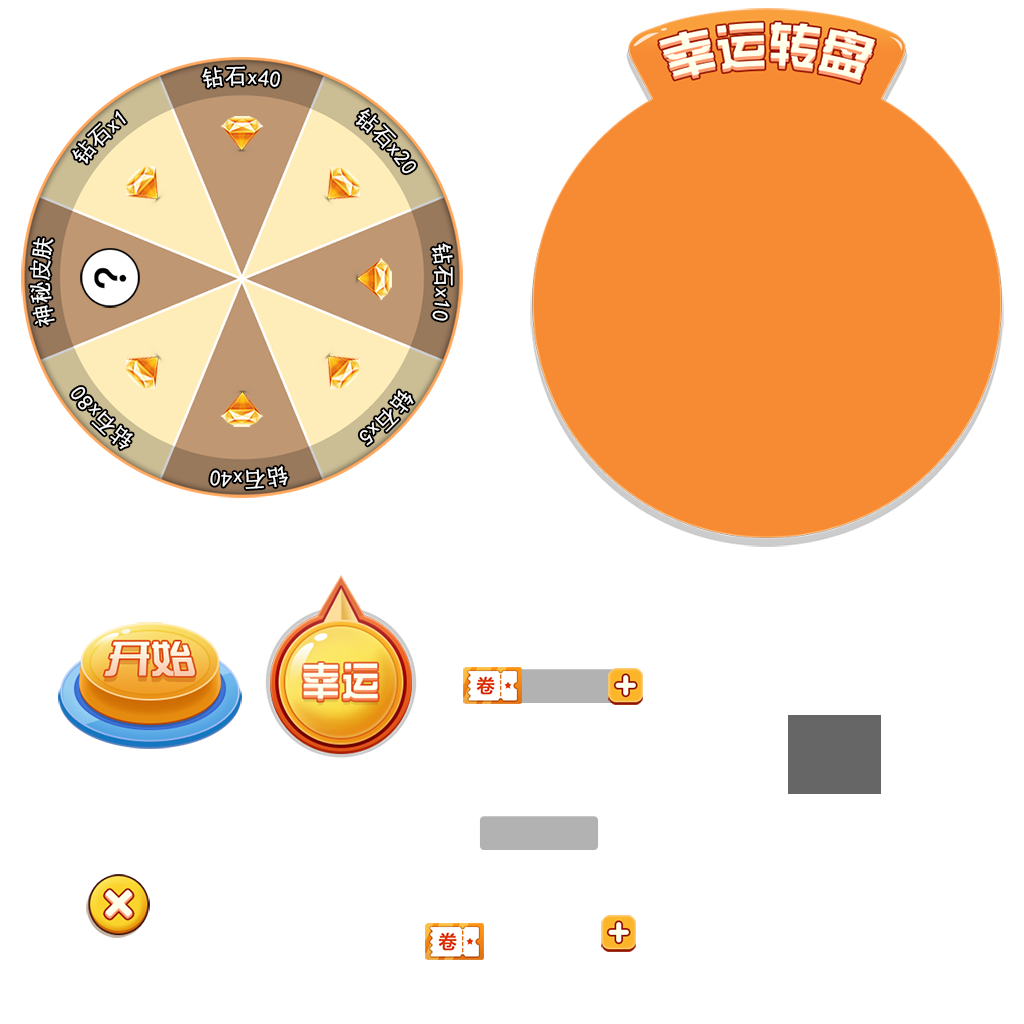
<style>
.page{position:relative;width:1024px;height:1024px;background:#ffffff}
.page>*{position:absolute;margin:0}
.t1{font:21.9px "SimHei";color:#ffffff}
</style>
<div class="page">
<p class="t1" style="left:202px;top:66px;width:78px;height:22px">钻石x40</p>
<p class="t1" style="left:72px;top:111px;width:54px;height:53px;rotate:-92deg">钻石x1</p>
<p class="t1" style="left:356px;top:109px;width:60px;height:65px;rotate:47deg">钻石x20</p>
<p class="t1" style="left:30px;top:238px;width:25px;height:89px;rotate:44deg">神秘皮肤</p>
<p class="t1" style="left:431px;top:243px;width:22px;height:78px;rotate:44deg">钻石x10</p>
<p class="t1" style="left:71px;top:387px;width:62px;height:63px;rotate:-133deg">钻石x80</p>
<p class="t1" style="left:359px;top:390px;width:55px;height:56px;rotate:86deg">钻石x5</p>
<p class="t1" style="left:210px;top:466px;width:78px;height:23px;rotate:87deg">钻石x40</p>
</div>
